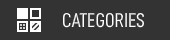
<style>
.page{position:relative;width:170px;height:40px;background:#333333}
.page>*{position:absolute;margin:0}
.t1{font:20px "D-DINCondensed";color:#ffffff}
</style>
<div class="page">
<p class="t1" style="left:63px;top:12px;width:82px;height:16px">CATEGORIES</p>
</div>
